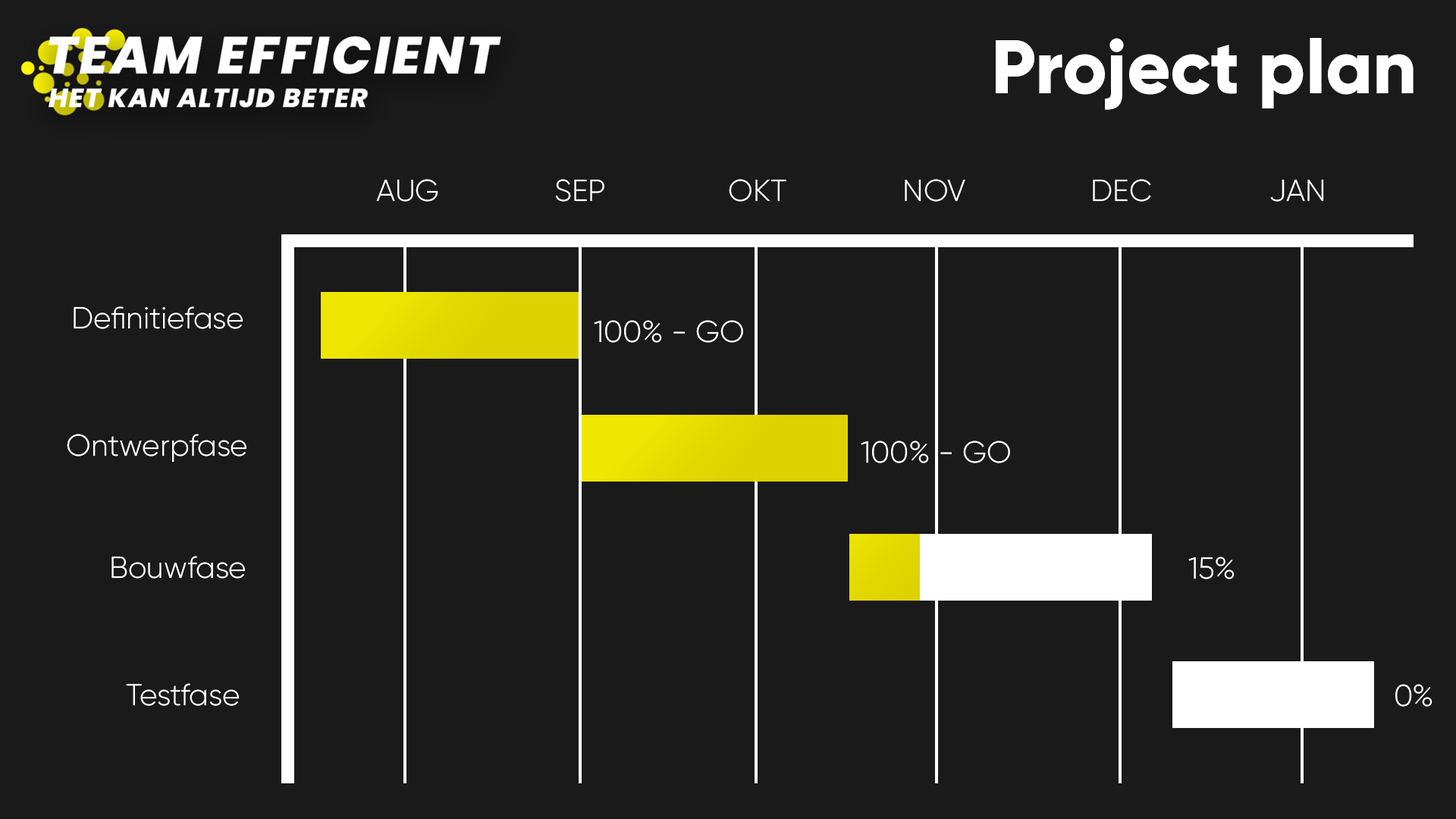
<style>
.page{position:relative;width:1456px;height:819px;background:#1a1a1a}
.page>*{position:absolute;margin:0}
.t1{font:75.8px "Gilroy-ExtraBold";color:#ffffff}
.t2{font:30.3px "Gilroy-Light";color:#ffffff}
</style>
<div class="page">
<p class="t1" style="left:996px;top:38px;width:418px;height:72px">Project plan</p>
<p class="t2" style="left:376px;top:179px;width:62px;height:23px">AUG</p>
<p class="t2" style="left:555px;top:179px;width:49px;height:23px">SEP</p>
<p class="t2" style="left:729px;top:179px;width:57px;height:23px">OKT</p>
<p class="t2" style="left:905px;top:179px;width:60px;height:23px">NOV</p>
<p class="t2" style="left:1093px;top:179px;width:58px;height:23px">DEC</p>
<p class="t2" style="left:1270px;top:179px;width:54px;height:23px">JAN</p>
<p class="t2" style="left:74px;top:306px;width:169px;height:23px">Definitiefase</p>
<p class="t2" style="left:594px;top:320px;width:149px;height:23px">100% - GO</p>
<p class="t2" style="left:67px;top:434px;width:179px;height:29px">Ontwerpfase</p>
<p class="t2" style="left:861px;top:441px;width:149px;height:22px">100% - GO</p>
<p class="t2" style="left:111px;top:556px;width:134px;height:23px">Bouwfase</p>
<p class="t2" style="left:1188px;top:557px;width:47px;height:22px">15%</p>
<p class="t2" style="left:126px;top:683px;width:113px;height:23px">Testfase</p>
<p class="t2" style="left:1395px;top:684px;width:37px;height:23px">0%</p>
</div>
